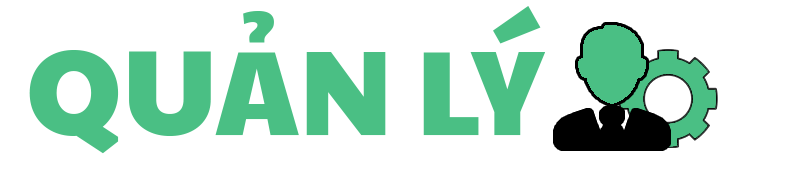
<style>
.page{position:relative;width:800px;height:173px;background:#ffffff}
.page>*{position:absolute;margin:0}
.t1{font:120px "PaytoneOne-Regular";color:#4abf84}
</style>
<div class="page">
<p class="t1" style="left:29px;top:6px;width:516px;height:148px">QUẢN LÝ</p>
</div>
